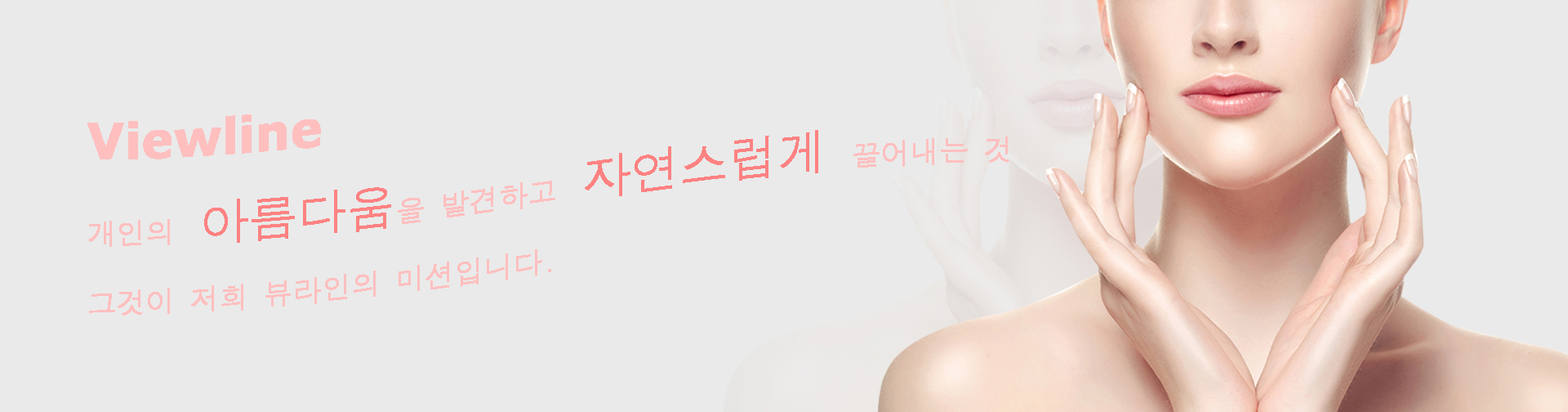
<style>
.page{position:relative;width:1568px;height:412px;background:#eaeaea}
.page>*{position:absolute;margin:0}
.t1{font:29.4px "DotumChe";color:#ffbfbf}
.t2{font:49px "Verdana-Bold";color:#ffbfbf}
.t3{font:49px "DotumChe";color:#fe8282}
</style>
<div class="page">
<p class="t1" style="left:87px;top:114px;width:922px;height:201px"><span class="t2">Viewline<br></span>개인의 <span class="t3">아름다움</span>을 발견하고 <span class="t3">자연스럽게 </span>끌어내는 것<br>그것이 저희 뷰라인의 미션입니다.</p>
</div>
